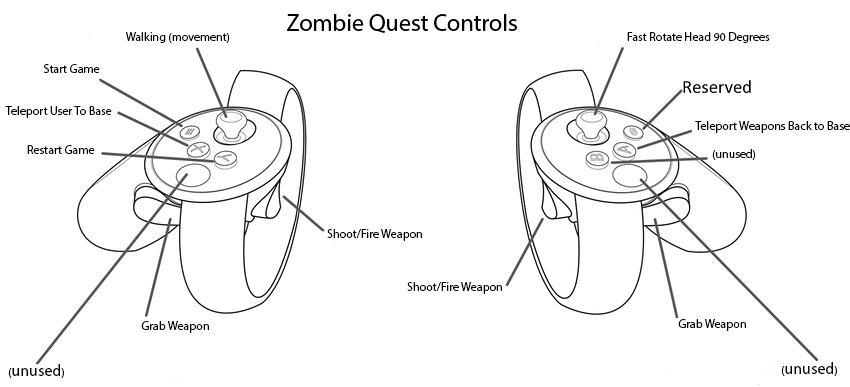
<style>
.page{position:relative;width:850px;height:387px;background:#ffffff}
.page>*{position:absolute;margin:0}
.t1{font:12px "MyriadPro-Regular";color:#000000}
.t2{font:16px "MyriadPro-Regular";color:#000000}
</style>
<div class="page">
<p class="t1" style="left:125px;top:32px;width:105px;height:11px">Walking (movement)</p>
<p class="t1" style="left:627px;top:32px;width:143px;height:11px">Fast Rotate Head 90 Degrees</p>
<p class="t1" style="left:43px;top:64px;width:57px;height:9px">Start Game</p>
<p class="t1" style="left:5px;top:106px;width:107px;height:12px">Teleport User To Base</p>
<p class="t1" style="left:695px;top:121px;width:155px;height:12px">Teleport Weapons Back to Base</p>
<p class="t1" style="left:27px;top:145px;width:68px;height:9px">Restart Game</p>
<p class="t1" style="left:712px;top:149px;width:44px;height:11px">(unused)</p>
<p class="t1" style="left:327px;top:229px;width:95px;height:12px">Shoot/Fire Weapon</p>
<p class="t1" style="left:407px;top:282px;width:95px;height:12px">Shoot/Fire Weapon</p>
<p class="t1" style="left:141px;top:321px;width:68px;height:12px">Grab Weapon</p>
<p class="t1" style="left:678px;top:319px;width:68px;height:12px">Grab Weapon</p>
<p class="t2" style="left:8px;top:364px;width:56px;height:14px"><span class="t1">(</span>unused<span class="t1">)</span></p>
<p class="t2" style="left:781px;top:362px;width:56px;height:14px"><span class="t1">(</span>unused<span class="t1">)</span></p>
</div>
